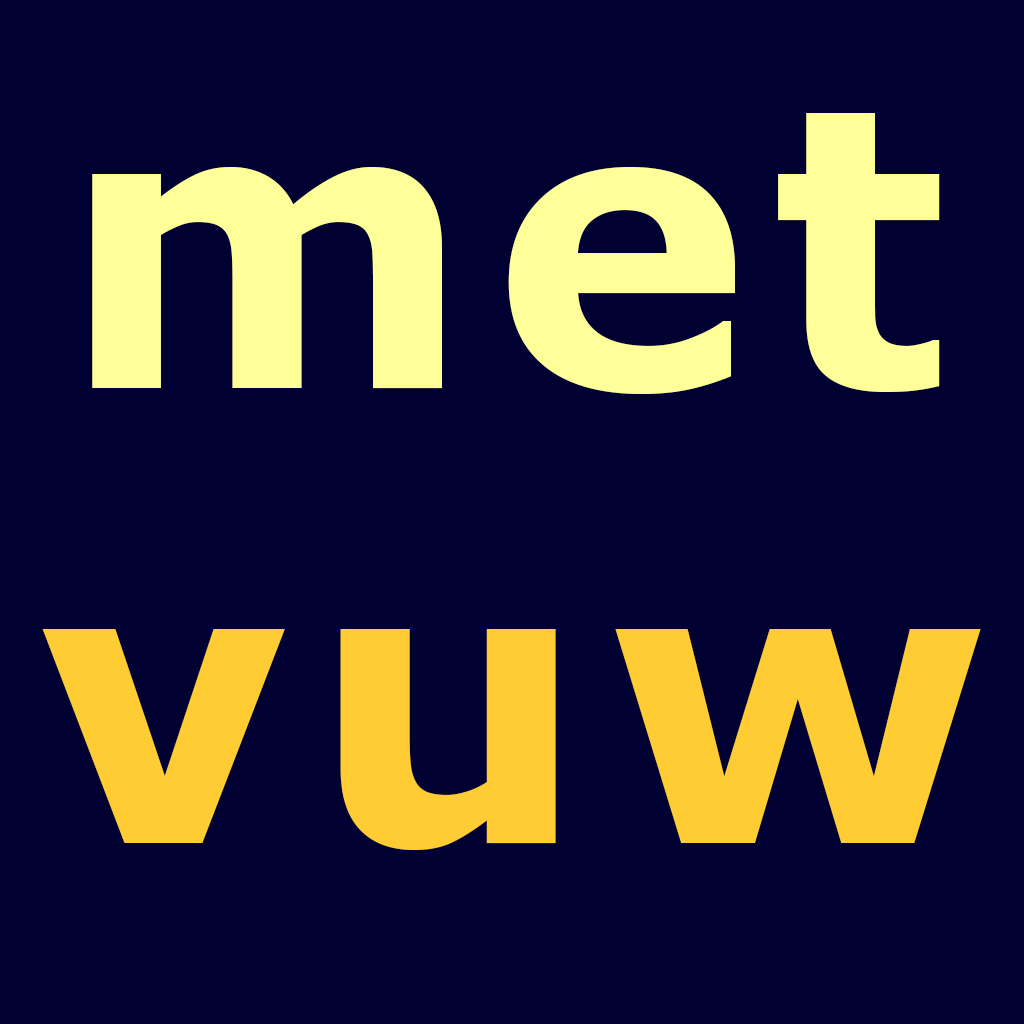
<style>
.page{position:relative;width:1024px;height:1024px;background:#000033}
.page>*{position:absolute;margin:0}
.t1{font:390px "Verdana-Bold";letter-spacing:0.05em;color:#ffff99}
.t2{font:390px "Verdana-Bold";letter-spacing:0.05em;color:#ffcd33}
</style>
<div class="page">
<p class="t1" style="left:92px;top:113px;width:848px;height:281px">met</p>
<p class="t2" style="left:42px;top:629px;width:939px;height:221px">vuw</p>
</div>
